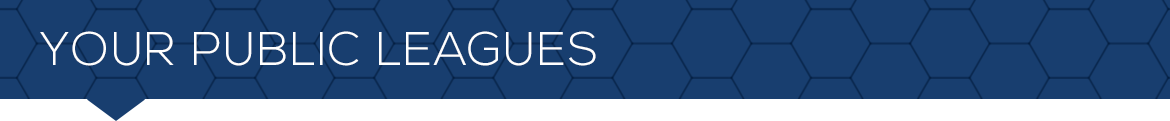
<style>
.page{position:relative;width:1170px;height:121px;background:#183e6f}
.page>*{position:absolute;margin:0}
.t1{font:47.2px "NexaLight";letter-spacing:0.03em;color:#ffffff}
</style>
<div class="page">
<p class="t1" style="left:40px;top:31px;width:556px;height:35px">YOUR PUBLIC LEAGUES</p>
</div>
